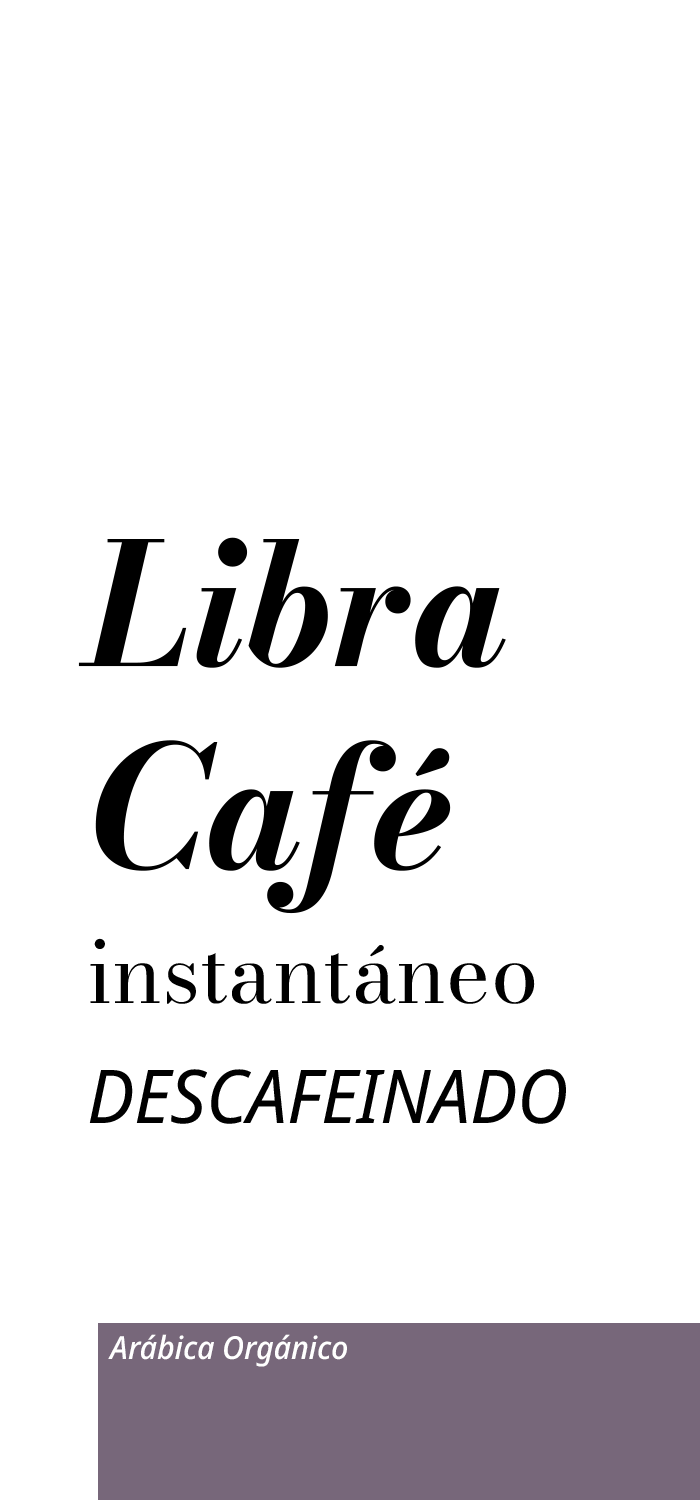
<style>
.page{position:relative;width:700px;height:1500px;background:#ffffff}
.page>*{position:absolute;margin:0}
.t1{font:74.1px "NotoSansDisplay-Italic";color:#000000}
.t2{font:169.3px "BodoniModaItalic-BoldItalic";color:#000000}
.t3{font:84.7px "BodoniModa-Regular";color:#000000}
.t4{font:31.8px "NotoSansDisplay-MediumItalic";color:#ffffff}
</style>
<div class="page">
<p class="t1" style="left:78px;top:537px;width:488px;height:587px"><span class="t2">Libra<br>Café<br></span><span class="t3">instantáneo<br></span>DESCAFEINADO</p>
<p class="t4" style="left:108px;top:1334px;width:239px;height:33px">Arábica Orgánico</p>
</div>
